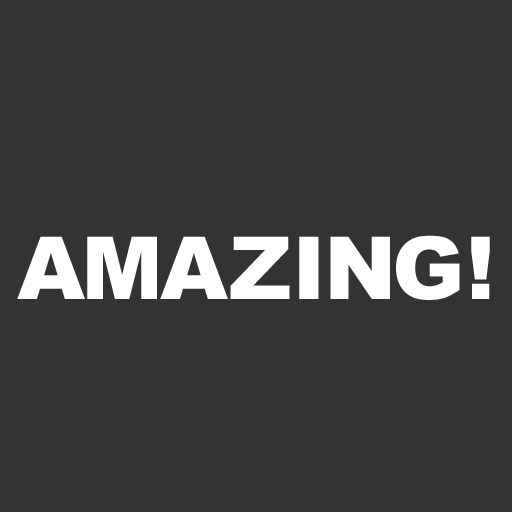
<style>
.page{position:relative;width:512px;height:512px;background:#333333}
.page>*{position:absolute;margin:0}
.t1{font:87px "Arial-Black";color:#ffffff}
</style>
<div class="page">
<p class="t1" style="left:17px;top:235px;width:473px;height:65px">AMAZING!</p>
</div>
